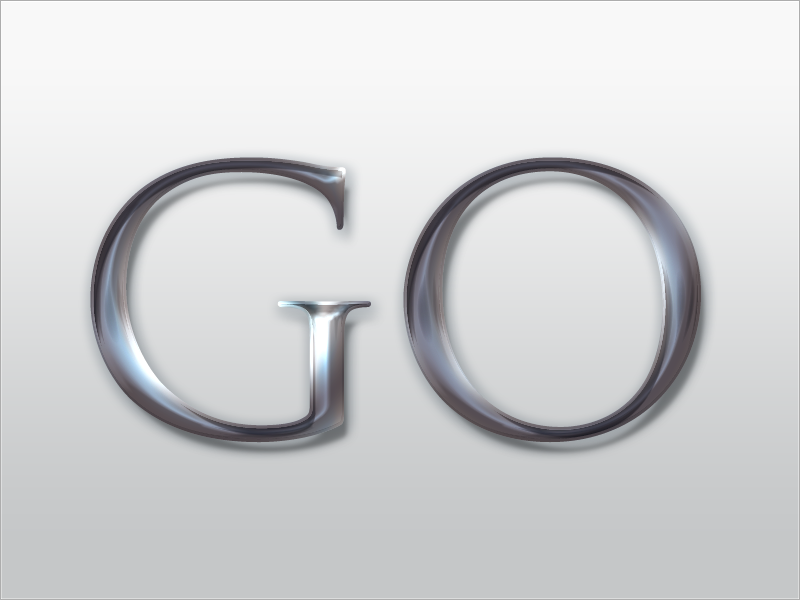
<style>
.page{position:relative;width:800px;height:600px}
.page>*{position:absolute;margin:0}
.t1{font:427.2px "TrajanPro-Regular"}
</style>
<div class="page">
<p class="t1" style="left:90px;top:157px;width:281px;height:286px">g</p>
<p class="t1" style="left:90px;top:157px;width:281px;height:286px">g</p>
<p class="t1" style="left:403px;top:157px;width:298px;height:286px">o</p>
<p class="t1" style="left:403px;top:157px;width:298px;height:286px">o</p>
</div>
